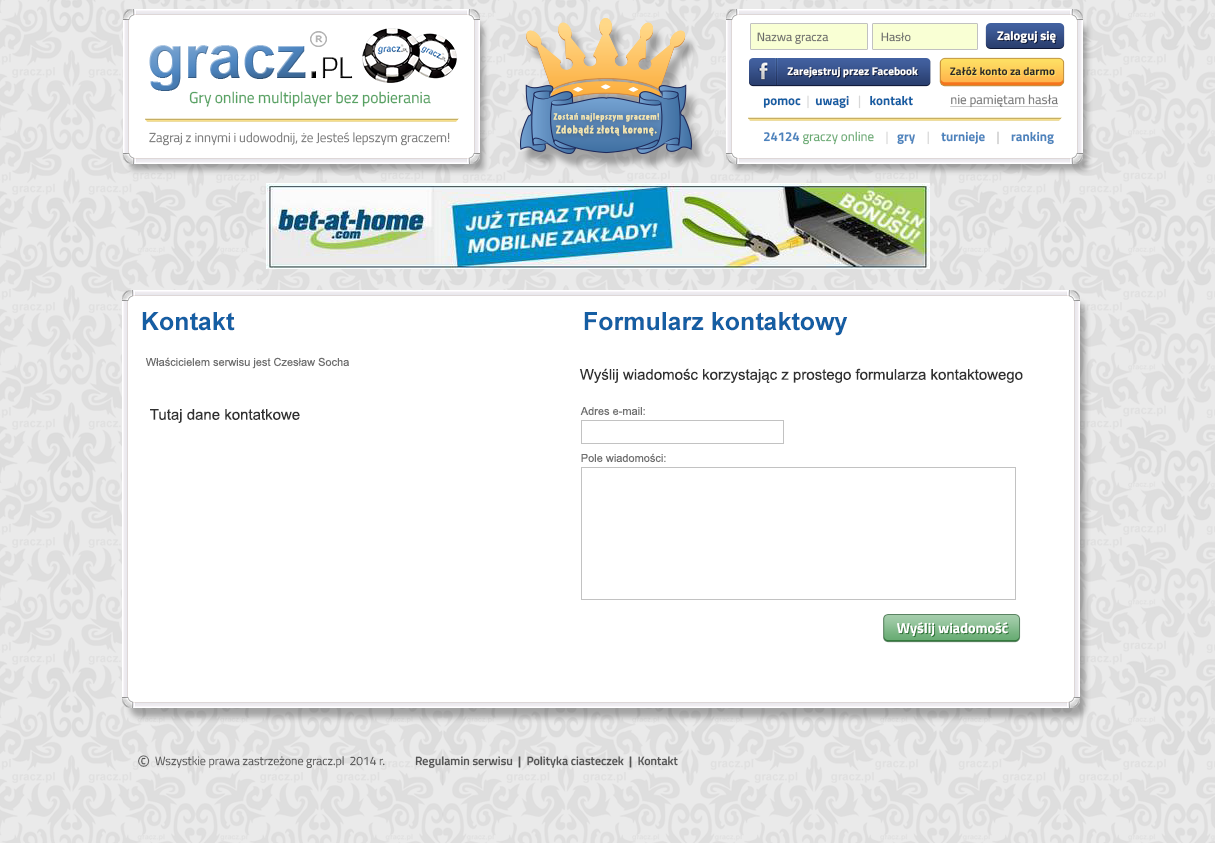
<style>
.page{position:relative;width:1215px;height:843px;background:#ffffff}
.page>*{position:absolute;margin:0}
.t1{font:12px "TitilliumWeb-Regular";color:#6a6a6a}
.t2{font:12.5px "TitilliumWeb-Bold";color:#ffffff}
.t3{font:11.1px "TitilliumWeb-Bold";color:#ffffff}
.t4{font:11.1px "TitilliumWeb-Bold";color:#292929}
.t5{font:15.7px "TitilliumWeb-Regular";color:#56a262}
.t6{font:13px "TitilliumWeb-Bold";color:#155ea3}
.t7{font:13px "TitilliumWeb-Regular";color:#d8d8d8}
.t8{font:13px "TitilliumWeb-Regular";color:#797979;text-decoration:underline}
.t9{font:9.4px "MyriadPro-BoldCond";letter-spacing:0.06em;color:#efe3af}
.t10{font:11.4px "MyriadPro-BoldCond";letter-spacing:0.06em;color:#efe3af}
.t11{font:13px "TitilliumWeb-Light";color:#787878}
.t12{font:13px "TitilliumWeb-Regular";color:#66a970}
.t13{font:13px "TitilliumWeb-Bold";color:#4c83bd}
.t14{font:13px "TitilliumWeb-Regular";color:#bdbdbd}
.t15{font:25px "Arial-BoldMT";color:#155ea3}
.t16{font:11px "ArialMT";color:#6e6e6e}
.t17{font:15px "ArialMT";color:#303030}
.t18{font:14.4px "TitilliumWeb-Bold";color:#ffffff}
.t19{font:20.5px "TitilliumWeb-Light";color:#535353}
.t20{font:12px "TitilliumWeb-Light";color:#535353}
.t21{font:12px "TitilliumWeb-SemiBold";color:#535353}
</style>
<div class="page">
<p class="t1" style="left:757px;top:32px;width:72px;height:12px">Nazwa gracza</p>
<p class="t1" style="left:881px;top:32px;width:30px;height:10px">Hasło</p>
<p class="t2" style="left:997px;top:31px;width:59px;height:12px">Zaloguj się</p>
<p class="t3" style="left:787px;top:67px;width:131px;height:11px">Zarejestruj przez Facebook</p>
<p class="t4" style="left:950px;top:66px;width:105px;height:10px">Załóż konto za darmo</p>
<p class="t5" style="left:189px;top:91px;width:242px;height:16px">Gry online multiplayer bez pobierania</p>
<p class="t6" style="left:763px;top:95px;width:150px;height:14px">pomoc <span class="t7"> |  </span>uwagi   <span class="t7">|   </span>kontakt</p>
<p class="t8" style="left:950px;top:94px;width:108px;height:14px">nie pamiętam hasła</p>
<p class="t9" style="left:553px;top:113px;width:107px;height:23px;text-align:center">Zostań najlepszym graczem!<br><span class="t10">Zdobądź złotą koronę.</span></p>
<p class="t11" style="left:149px;top:132px;width:301px;height:14px">Zagraj z innymi i udowodnij, że Jesteś lepszym graczem!</p>
<p class="t12" style="left:763px;top:131px;width:291px;height:14px"><span class="t13">24124 </span>graczy online    <span class="t7">|   </span><span class="t13">gry    </span><span class="t7">|   </span><span class="t13"> turnieje    </span><span class="t14">|    </span><span class="t13">ranking</span></p>
<p class="t15" style="left:142px;top:312px;width:93px;height:19px">Kontakt</p>
<p class="t15" style="left:584px;top:312px;width:264px;height:24px">Formularz kontaktowy</p>
<p class="t16" style="left:145px;top:357px;width:204px;height:12px">Właścicielem serwisu jest Czesław Socha</p>
<p class="t17" style="left:579px;top:368px;width:444px;height:15px">Wyślij wiadomośc korzystając z prostego formularza kontaktowego</p>
<p class="t17" style="left:150px;top:409px;width:150px;height:14px">Tutaj dane kontatkowe</p>
<p class="t16" style="left:580px;top:407px;width:65px;height:9px">Adres e-mail:</p>
<p class="t16" style="left:581px;top:453px;width:85px;height:10px">Pole wiadomości:</p>
<p class="t18" style="left:897px;top:622px;width:111px;height:15px">Wyślij wiadomość</p>
<p class="t19" style="left:138px;top:755px;width:12px;height:12px">©</p>
<p class="t20" style="left:155px;top:756px;width:230px;height:12px">Wszystkie prawa zastrzeżone gracz.pl  2014 r.</p>
<p class="t21" style="left:415px;top:756px;width:263px;height:12px">Regulamin serwisu  |  Polityka ciasteczek  |  Kontakt</p>
</div>
